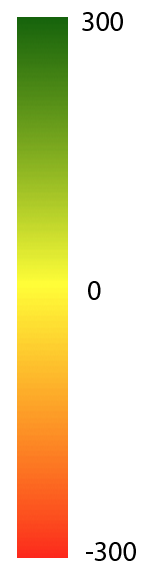
<style>
.page{position:relative;width:153px;height:576px;background:#ffffff}
.page>*{position:absolute;margin:0}
.t1{font:28px "MyriadPro-Regular";color:#000000}
</style>
<div class="page">
<p class="t1" style="left:82px;top:12px;width:41px;height:19px">300</p>
<p class="t1" style="left:88px;top:281px;width:13px;height:19px">0</p>
<p class="t1" style="left:86px;top:542px;width:50px;height:19px">-300</p>
</div>
